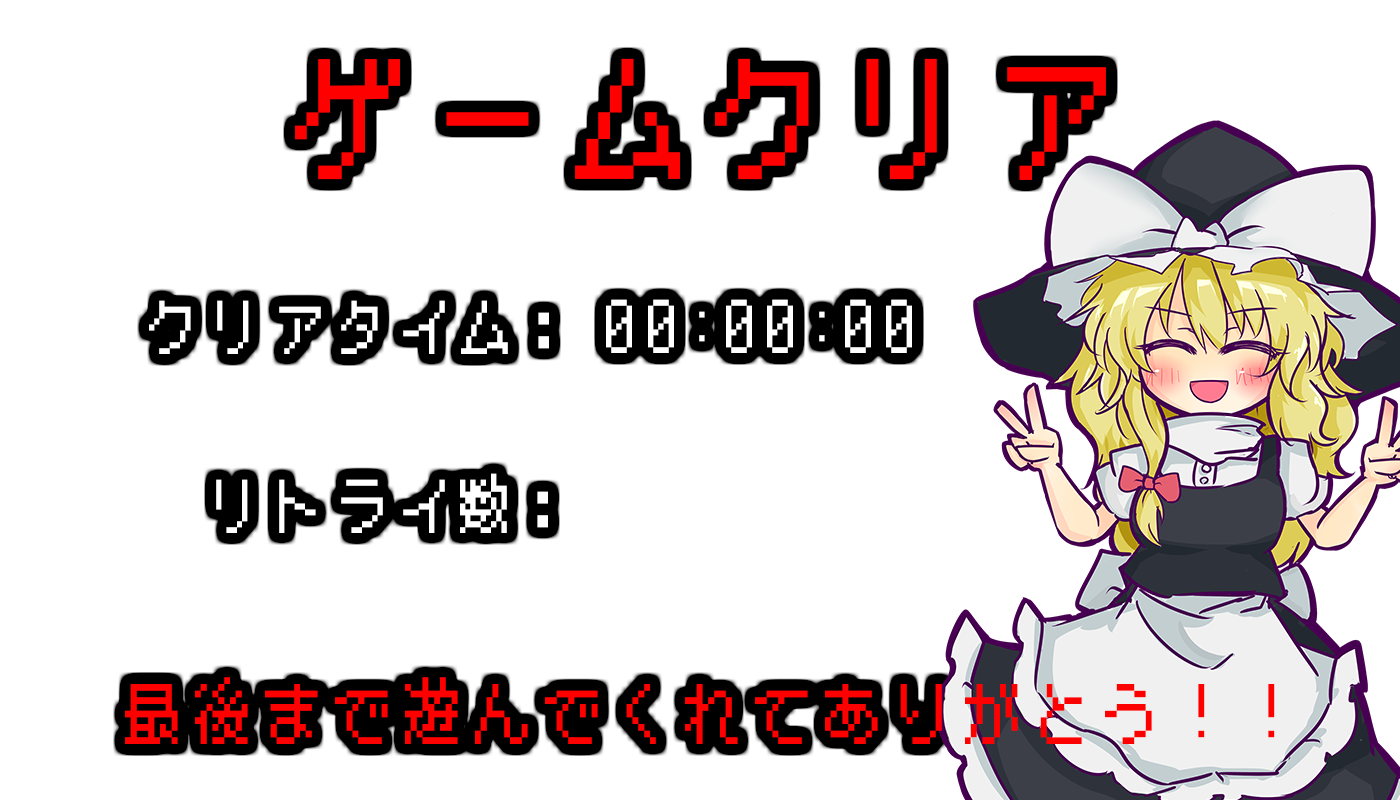
<style>
.page{position:relative;width:1400px;height:800px;background:#ffffff}
.page>*{position:absolute;margin:0}
.t1{font:133.3px "BestTenDOT";letter-spacing:0.2em;color:#ff0000;scale:0.88 1}
.t2{font:140.7px "BestTenDOT";letter-spacing:0.2em;color:#ff0000;scale:0.88 1}
.t3{font:59.3px "BestTenDOT";letter-spacing:0.2em;color:#ffffff;scale:0.88 1}
.t4{font:66.7px "BestTenDOT";letter-spacing:0.2em;color:#ff0000;scale:0.88 1}
</style>
<div class="page">
<p class="t1" style="left:295px;top:58px;width:811px;height:122px">ゲームクリ<span class="t2">ア</span></p>
<p class="t3" style="left:149px;top:300px;width:400px;height:54px">クリアタイム：</p>
<p class="t3" style="left:606px;top:299px;width:306px;height:54px">00:00:00</p>
<p class="t3" style="left:216px;top:473px;width:332px;height:60px">リトライ数：</p>
<p class="t4" style="left:125px;top:677px;width:1150px;height:67px">最後まで遊んでくれてありがとう！！</p>
</div>
